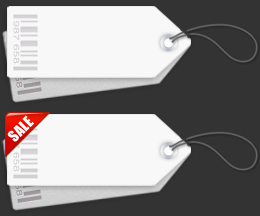
<style>
.page{position:relative;width:260px;height:216px;background:#333333}
.page>*{position:absolute;margin:0}
.t1{font:14.4px "Impact";letter-spacing:0.025em;color:#fdfdfd;text-transform:uppercase}
</style>
<div class="page">
<p class="t1" style="left:7px;top:115px;width:27px;height:27px;rotate:-45deg">SALE</p>
</div>
